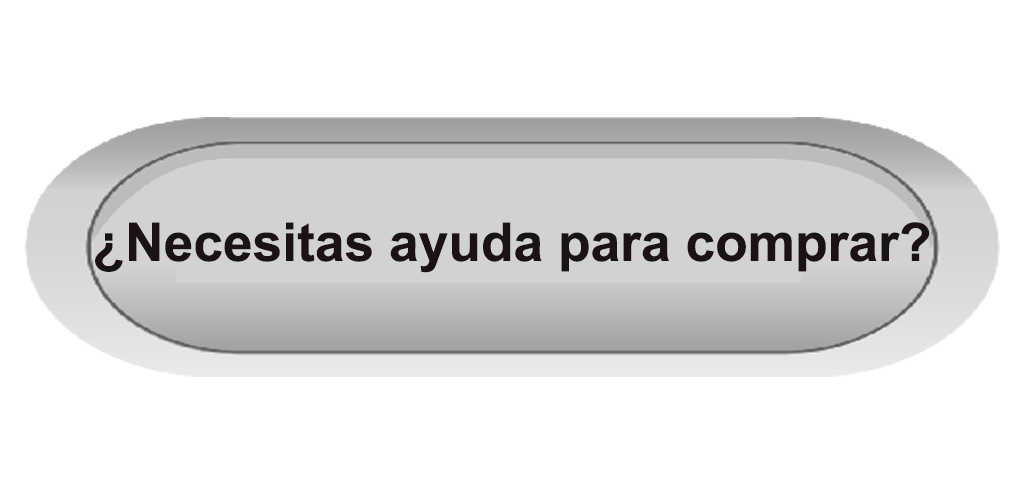
<style>
.page{position:relative;width:1024px;height:493px;background:#ffffff}
.page>*{position:absolute;margin:0}
.t1{font:53.3px "Arial-BoldMT";color:#1b1313}
</style>
<div class="page">
<p class="t1" style="left:95px;top:222px;width:835px;height:51px">¿Necesitas ayuda para comprar?</p>
</div>
